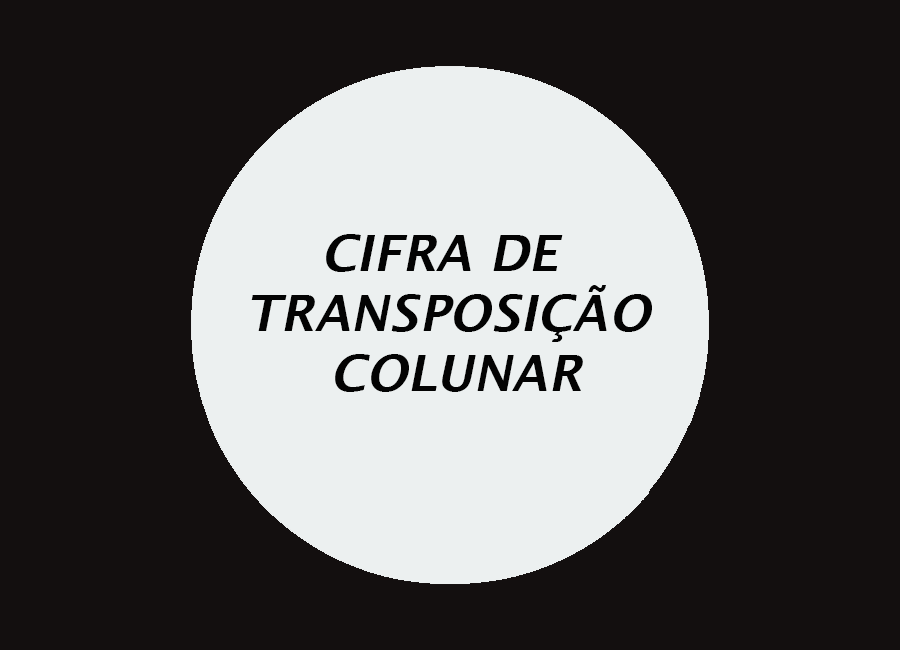
<style>
.page{position:relative;width:900px;height:650px;background:#130f0f}
.page>*{position:absolute;margin:0}
.t1{font:50px "LucidaSans-DemiItalic";color:#030303}
</style>
<div class="page">
<p class="t1" style="left:251px;top:234px;width:401px;height:158px;text-align:center">CIFRA DE <br>TRANSPOSIÇÃO<br> COLUNAR</p>
</div>
